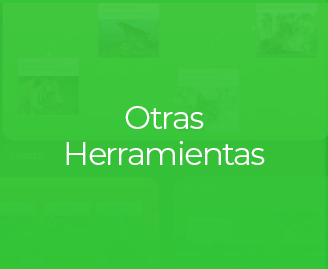
<style>
.page{position:relative;width:328px;height:269px}
.page>*{position:absolute;margin:0}
.t1{font:32px/36.3px "Montserrat-Regular";letter-spacing:-0.05em;color:#ffffff}
</style>
<div class="page">
<p class="t1" style="left:66px;top:106px;width:199px;height:59px;text-align:center">Otras Herramientas</p>
</div>
